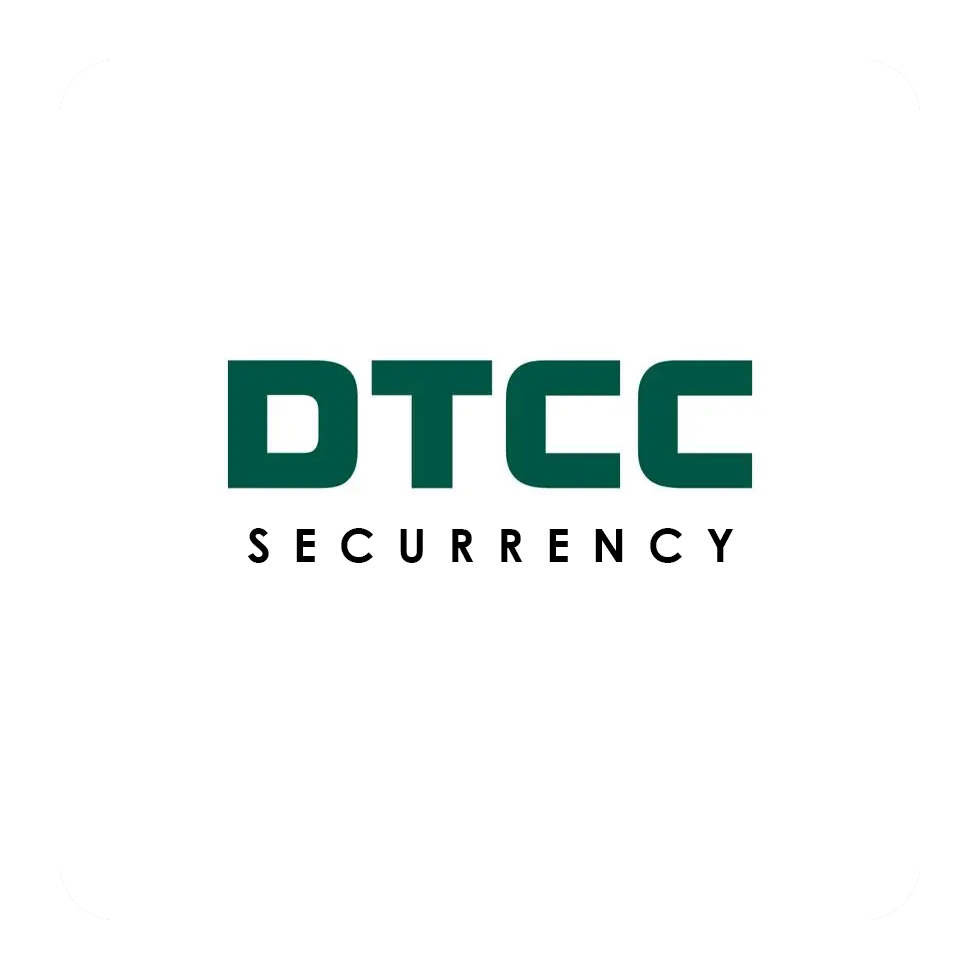
<style>
.page{position:relative;width:980px;height:980px;background:#ffffff}
.page>*{position:absolute;margin:0}
.t1{font:46px "CenturyGothic-Bold";letter-spacing:0.48em;color:#000000}
</style>
<div class="page">
<p class="t1" style="left:248px;top:528px;width:486px;height:35px">SECURRENCY</p>
</div>
